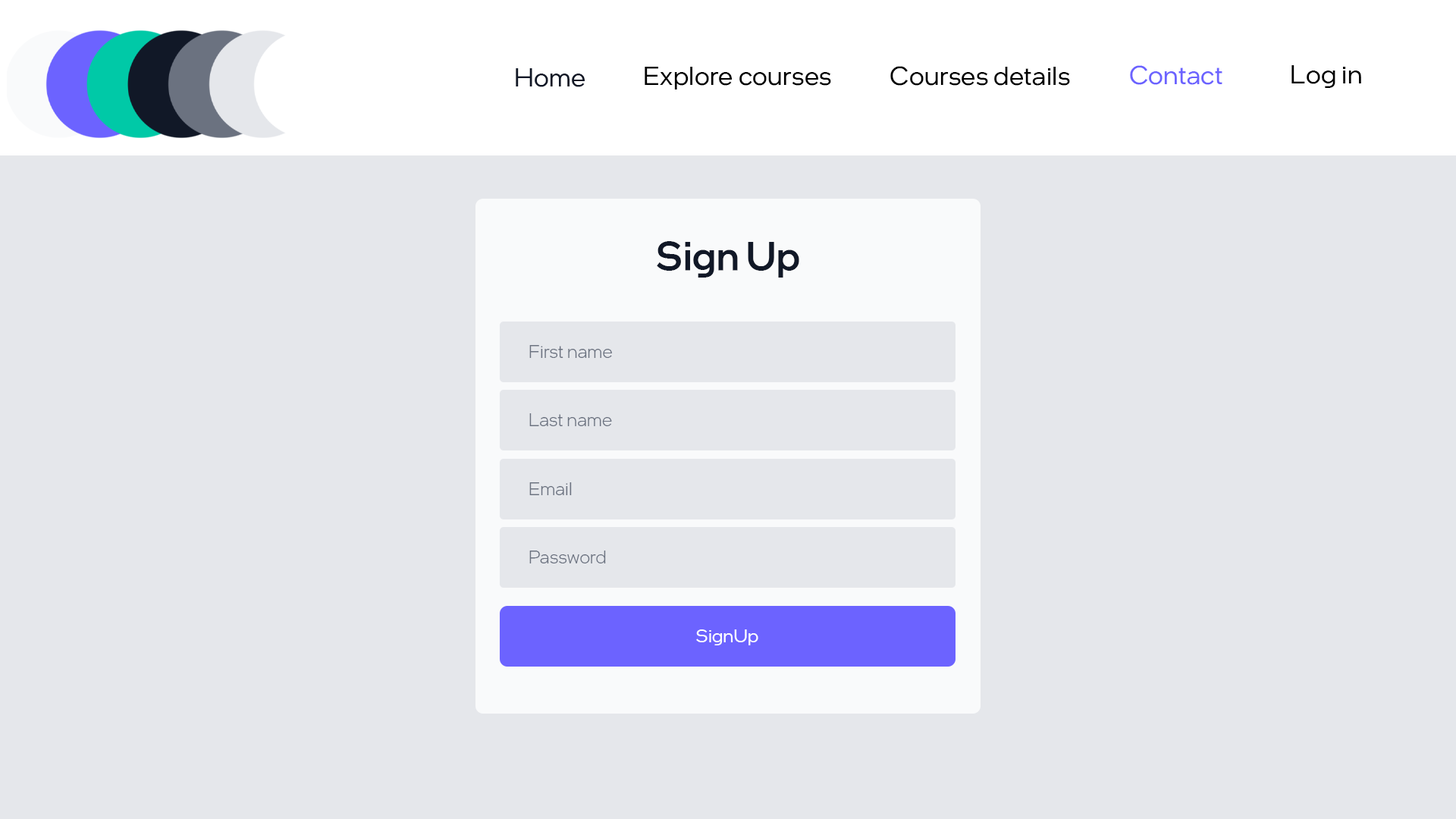
<style>
.page{position:relative;width:1456px;height:819px;background:#e5e7eb}
.page>*{position:absolute;margin:0}
.t1{font:26.5px "IntelOneDisplay-Regular";letter-spacing:0.01em;color:#000000}
.t2{font:26.5px "IntelOneDisplay-Regular";letter-spacing:0.01em;color:#6c63ff}
.t3{font:26.5px "IntelOneDisplay-Regular";letter-spacing:0.01em;color:#111827}
.t4{font:39.5px "IntelOneDisplay-Medium";letter-spacing:0.01em;color:#111827}
.t5{font:18.6px "IntelOneDisplay-Light";letter-spacing:0.01em;color:#6b7280}
.t6{font:18.6px "IntelOneDisplay-Regular";letter-spacing:0.01em;color:#ffffff}
</style>
<div class="page">
<p class="t1" style="left:890px;top:66px;width:180px;height:20px">Courses details</p>
<p class="t2" style="left:1130px;top:65px;width:92px;height:20px">Contact</p>
<p class="t1" style="left:1291px;top:65px;width:70px;height:23px">Log in</p>
<p class="t3" style="left:516px;top:68px;width:69px;height:19px">Home</p>
<p class="t1" style="left:645px;top:67px;width:186px;height:22px">Explore courses</p>
<p class="t4" style="left:657px;top:241px;width:142px;height:37px">Sign Up</p>
<p class="t5" style="left:529px;top:345px;width:83px;height:13px">First name</p>
<p class="t5" style="left:529px;top:413px;width:83px;height:13px">Last name</p>
<p class="t5" style="left:529px;top:482px;width:43px;height:13px">Email</p>
<p class="t5" style="left:529px;top:551px;width:77px;height:12px">Password</p>
<p class="t6" style="left:696px;top:629px;width:62px;height:16px">SignUp</p>
</div>
